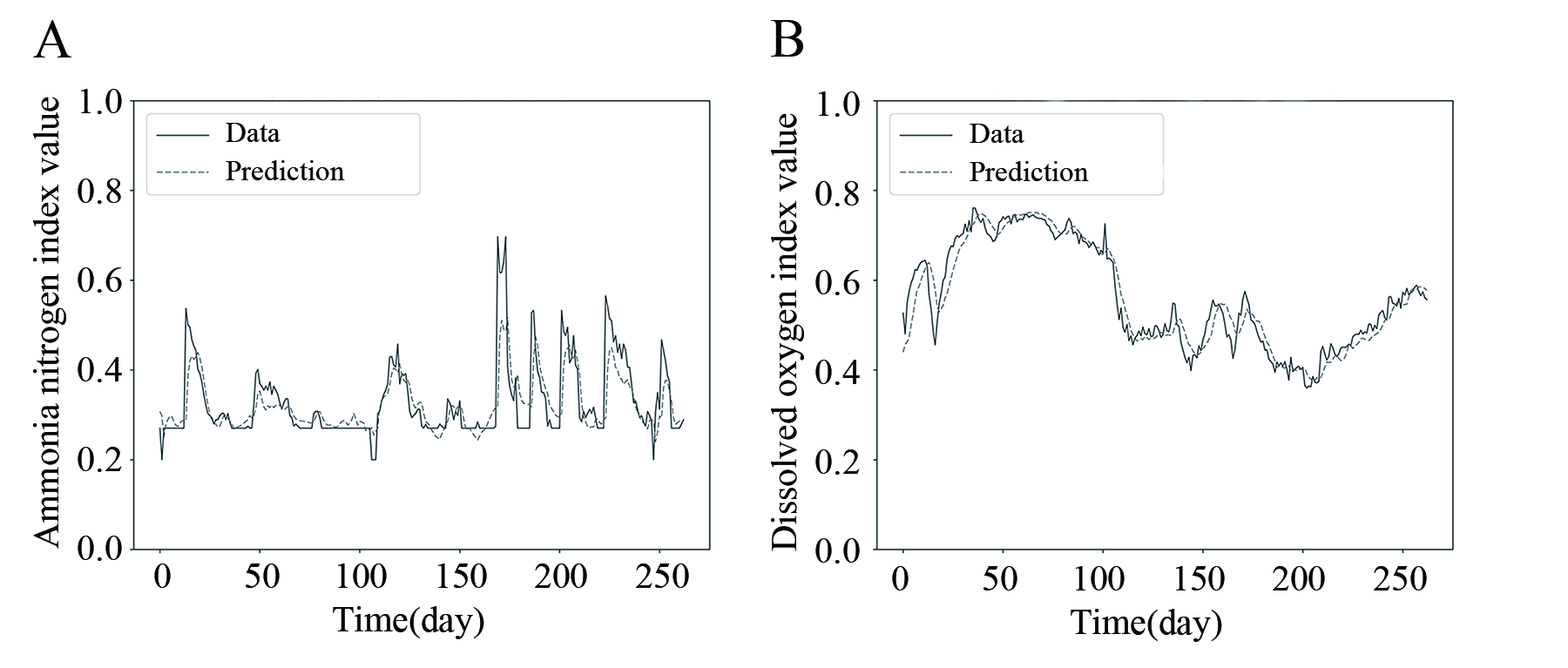
<style>
.page{position:relative;width:1568px;height:668px;background:#ffffff}
.page>*{position:absolute;margin:0}
.t1{font:54.4px "TimesNewRomanPSMT";color:#040606}
.t2{font:36.3px "TimesNewRomanPSMT";color:#040606}
.t3{font:29px "TimesNewRomanPSMT";color:#040606}
</style>
<div class="page">
<p class="t1" style="left:33px;top:20px;width:38px;height:37px">A</p>
<p class="t1" style="left:771px;top:20px;width:32px;height:37px">B</p>
<p class="t2" style="left:81px;top:89px;width:41px;height:25px">1.0</p>
<p class="t2" style="left:33px;top:97px;width:33px;height:452px;rotate:180deg">Ammonia nitrogen index value</p>
<p class="t2" style="left:819px;top:91px;width:41px;height:26px">1.0</p>
<p class="t2" style="left:771px;top:113px;width:33px;height:438px;rotate:180deg">Dissolved oxygen index value</p>
<p class="t3" style="left:226px;top:123px;width:54px;height:19px">Data</p>
<p class="t3" style="left:970px;top:124px;width:54px;height:19px">Data</p>
<p class="t3" style="left:226px;top:160px;width:119px;height:20px">Prediction</p>
<p class="t3" style="left:970px;top:161px;width:119px;height:20px">Prediction</p>
<p class="t2" style="left:78px;top:179px;width:43px;height:25px">0.8</p>
<p class="t2" style="left:815px;top:181px;width:44px;height:25px">0.8</p>
<p class="t2" style="left:78px;top:267px;width:44px;height:26px">0.6</p>
<p class="t2" style="left:815px;top:270px;width:45px;height:25px">0.6</p>
<p class="t2" style="left:78px;top:357px;width:44px;height:25px">0.4</p>
<p class="t2" style="left:815px;top:360px;width:45px;height:25px">0.4</p>
<p class="t2" style="left:78px;top:447px;width:44px;height:25px">0.2</p>
<p class="t2" style="left:815px;top:449px;width:45px;height:26px">0.2</p>
<p class="t2" style="left:78px;top:536px;width:44px;height:25px">0.0</p>
<p class="t2" style="left:815px;top:538px;width:45px;height:26px">0.0</p>
<p class="t2" style="left:154px;top:564px;width:17px;height:24px">0</p>
<p class="t2" style="left:246px;top:564px;width:34px;height:24px">50</p>
<p class="t2" style="left:338px;top:564px;width:49px;height:24px">100</p>
<p class="t2" style="left:438px;top:564px;width:49px;height:24px">150</p>
<p class="t2" style="left:535px;top:564px;width:52px;height:24px">200</p>
<p class="t2" style="left:636px;top:564px;width:53px;height:24px">250</p>
<p class="t2" style="left:892px;top:566px;width:17px;height:25px">0</p>
<p class="t2" style="left:983px;top:566px;width:34px;height:25px">50</p>
<p class="t2" style="left:1076px;top:566px;width:49px;height:25px">100</p>
<p class="t2" style="left:1176px;top:566px;width:49px;height:25px">150</p>
<p class="t2" style="left:1273px;top:566px;width:52px;height:25px">200</p>
<p class="t2" style="left:1374px;top:566px;width:53px;height:25px">250</p>
<p class="t2" style="left:333px;top:606px;width:151px;height:33px">Time(day)</p>
<p class="t2" style="left:1071px;top:609px;width:151px;height:33px">Time(day)</p>
</div>
